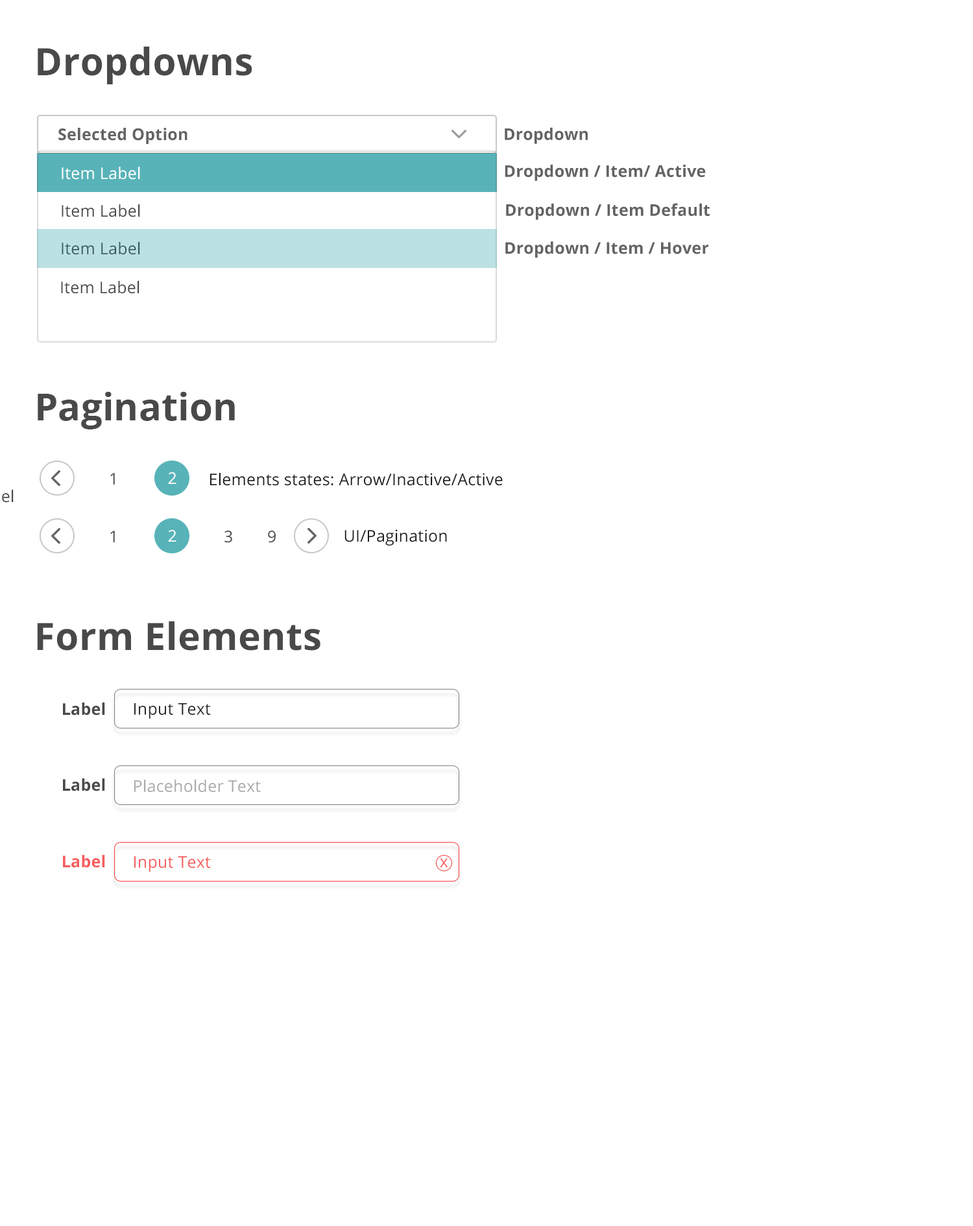
<style>
.page{position:relative;width:973px;height:1226px;background:#ffffff}
.page>*{position:absolute;margin:0}
.t1{font:37.8px "OpenSans-Bold";letter-spacing:0.01em;color:#494949}
.t2{font:16.2px "OpenSans-Bold";letter-spacing:0.01em;color:#636363}
.t3{font:16.2px "OpenSans";letter-spacing:0.01em;color:#ffffff}
.t4{font:16.2px "OpenSans";letter-spacing:0.01em;color:#494949}
.t5{font:16.2px "OpenSans";letter-spacing:0.01em;color:#35585a}
.t6{font:37.8px "OpenSans-Bold";color:#494949}
.t7{font:16.2px "OpenSans";letter-spacing:0.01em;color:#1c1c1c}
.t8{font:16.2px "OpenSans";letter-spacing:0.01em;color:#1d1c1c}
.t9{font:16.2px "OpenSans-Bold";letter-spacing:0.01em;color:#494949}
.t10{font:16.2px "OpenSans";letter-spacing:0.01em;color:#2a2929}
.t11{font:16.2px "OpenSans";letter-spacing:0.01em;color:#aaaaaa}
.t12{font:16.2px "OpenSans-Bold";letter-spacing:0.01em;color:#f75d5d}
.t13{font:16.2px "OpenSans";letter-spacing:0.01em;color:#f75d5d}
</style>
<div class="page">
<p class="t1" style="left:38px;top:46px;width:214px;height:38px">Dropdowns</p>
<p class="t2" style="left:58px;top:128px;width:129px;height:16px">Selected Option</p>
<p class="t2" style="left:505px;top:127px;width:83px;height:17px">Dropdown</p>
<p class="t3" style="left:62px;top:167px;width:78px;height:13px">Item Label</p>
<p class="t2" style="left:505px;top:164px;width:201px;height:17px">Dropdown / Item/ Active</p>
<p class="t4" style="left:62px;top:204px;width:78px;height:13px">Item Label</p>
<p class="t2" style="left:506px;top:203px;width:204px;height:17px">Dropdown / Item Default</p>
<p class="t5" style="left:62px;top:242px;width:78px;height:13px">Item Label</p>
<p class="t2" style="left:505px;top:241px;width:204px;height:17px">Dropdown / Item / Hover</p>
<p class="t4" style="left:61px;top:281px;width:78px;height:13px">Item Label</p>
<p class="t6" style="left:38px;top:392px;width:197px;height:37px">Pagination</p>
<p class="t4" style="left:110px;top:473px;width:5px;height:11px">1</p>
<p class="t3" style="left:168px;top:472px;width:8px;height:12px">2</p>
<p class="t7" style="left:210px;top:473px;width:293px;height:13px">Elements states: Arrow/Inactive/Active</p>
<p class="t4" style="left:110px;top:531px;width:5px;height:11px">1</p>
<p class="t3" style="left:168px;top:530px;width:8px;height:12px">2</p>
<p class="t4" style="left:224px;top:531px;width:8px;height:12px">3</p>
<p class="t4" style="left:268px;top:531px;width:8px;height:12px">9</p>
<p class="t8" style="left:344px;top:529px;width:103px;height:16px">UI/Pagination</p>
<p class="t1" style="left:37px;top:621px;width:283px;height:29px">Form Elements</p>
<p class="t9" style="left:63px;top:702px;width:42px;height:13px">Label</p>
<p class="t10" style="left:134px;top:703px;width:77px;height:16px">Input Text</p>
<p class="t9" style="left:63px;top:778px;width:42px;height:13px">Label</p>
<p class="t11" style="left:134px;top:779px;width:127px;height:13px">Placeholder Text</p>
<p class="t12" style="left:63px;top:855px;width:42px;height:13px">Label</p>
<p class="t13" style="left:134px;top:856px;width:77px;height:16px">Input Text</p>
<p class="t13" style="left:440px;top:858px;width:8px;height:9px">x</p>
</div>
